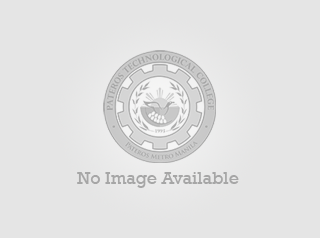
<style>
.page{position:relative;width:320px;height:238px;background:#e5e5e5}
.page>*{position:absolute;margin:0}
.t1{font:18px "Rockwell";color:#a6a6a6}
</style>
<div class="page">
<p class="t1" style="left:77px;top:172px;width:162px;height:16px">No Image Available</p>
</div>
